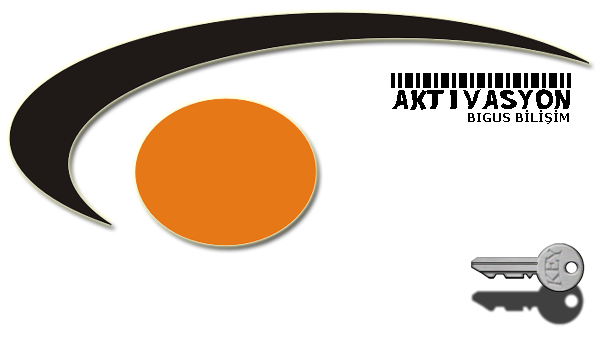
<style>
.page{position:relative;width:600px;height:340px;background:#ffffff}
.page>*{position:absolute;margin:0}
.t1{font:36px "ZSD-BarCode";color:#000000;text-transform:uppercase}
.t2{font:12px "Verdana-Bold";color:#000000;text-transform:uppercase}
</style>
<div class="page">
<p class="t1" style="left:391px;top:73px;width:180px;height:37px">AKTIVASYON</p>
<p class="t2" style="left:468px;top:110px;width:101px;height:14px">BIGUS BİLİŞİM</p>
</div>
